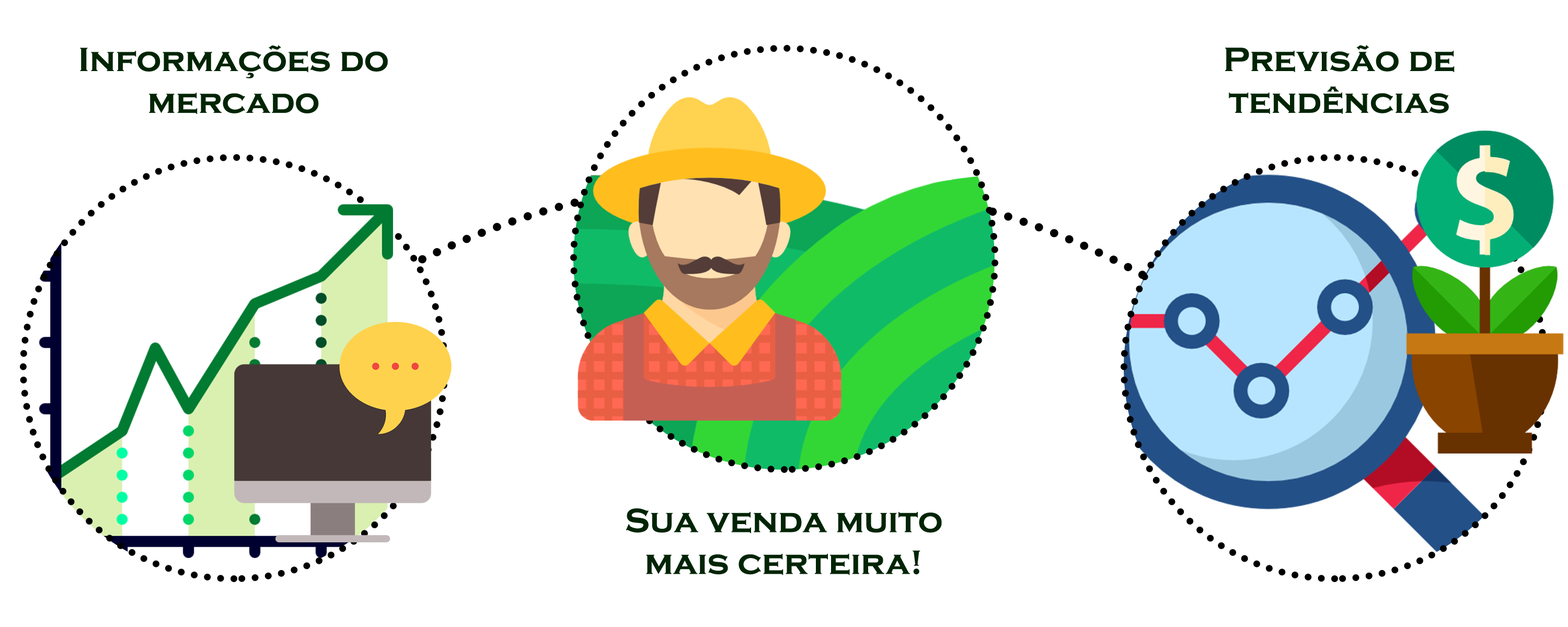
<style>
.page{position:relative;width:1568px;height:627px;background:#ffffff}
.page>*{position:absolute;margin:0}
.t1{font:34.8px "CopperplateGothic-Bold";color:#002404}
</style>
<div class="page">
<p class="t1" style="left:80px;top:45px;width:308px;height:69px;text-align:center">Informações do<br>mercado</p>
<p class="t1" style="left:1225px;top:45px;width:230px;height:69px;text-align:center">Previsão de<br>tendências</p>
<p class="t1" style="left:626px;top:509px;width:316px;height:66px;text-align:center">Sua venda muito<br>mais certeira!</p>
</div>
